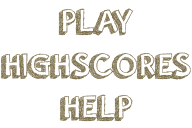
<style>
.page{position:relative;width:192px;height:128px;background:#ffffff}
.page>*{position:absolute;margin:0}
.t1{font:36px "orangejuice";color:#7f724f}
</style>
<div class="page">
<p class="t1" style="left:58px;top:8px;width:75px;height:28px">PLAY</p>
<p class="t1" style="left:0px;top:52px;width:191px;height:28px">HIGHSCORES</p>
<p class="t1" style="left:59px;top:94px;width:74px;height:28px">HELP</p>
</div>
